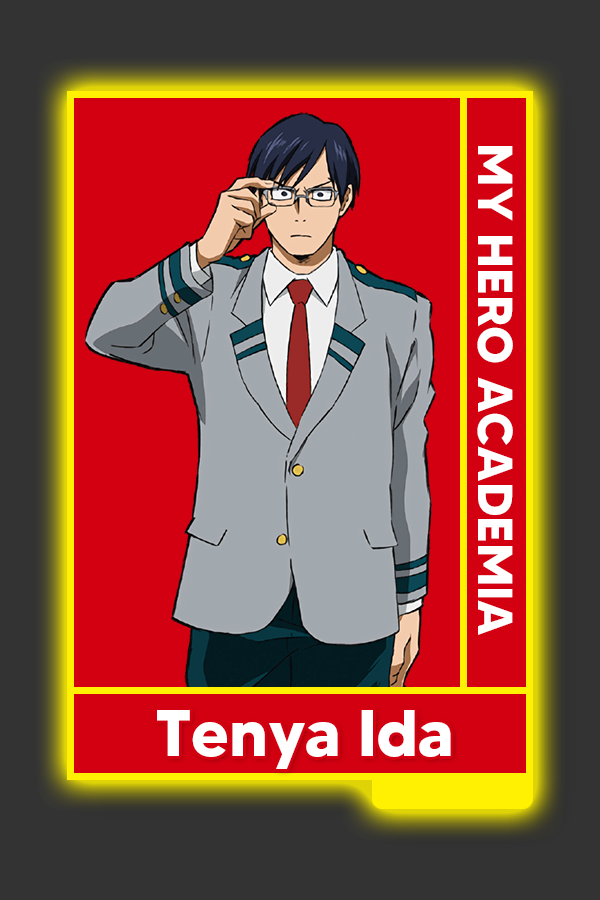
<style>
.page{position:relative;width:600px;height:900px;background:#d20010}
.page>*{position:absolute;margin:0}
.t1{font:48.8px "MADETOMMY-Bold";color:#ffffff}
.t2{font:65.2px "MADETOMMY-Bold";color:#ffffff}
</style>
<div class="page">
<p class="t1" style="left:477px;top:146px;width:36px;height:489px;rotate:90deg">MY HERO ACADEMIA</p>
<p class="t2" style="left:157px;top:710px;width:294px;height:59px">Tenya Ida</p>
</div>
